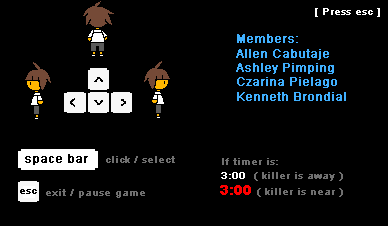
<style>
.page{position:relative;width:388px;height:226px;background:#000000}
.page>*{position:absolute;margin:0}
.t1{font:10px "ArialMT";color:#ffffff;font-weight:bold}
.t2{font:12px "ArialMT";color:#40b0ff;font-weight:bold}
.t3{font:10px "ArialMT";color:#707070;font-weight:bold}
.t4{font:14px "Arial-BoldMT";color:#ff0000;font-weight:bold}
</style>
<div class="page">
<p class="t1" style="left:315px;top:8px;width:65px;height:9px">[ Press esc ]</p>
<p class="t2" style="left:236px;top:34px;width:110px;height:67px">Members: <br>Allen Cabutaje<br>Ashley Pimping<br>Czarina Pielago<br>Kenneth Brondial</p>
<p class="t3" style="left:106px;top:156px;width:69px;height:7px">click / select</p>
<p class="t3" style="left:222px;top:158px;width:56px;height:7px">If timer is:</p>
<p class="t3" style="left:221px;top:172px;width:122px;height:9px"><span class="t1">3:00</span>  ( killer is away )</p>
<p class="t3" style="left:220px;top:185px;width:123px;height:12px"><span class="t4">3:00 </span>( killer is near )</p>
<p class="t3" style="left:46px;top:189px;width:99px;height:9px">exit / pause game</p>
</div>
